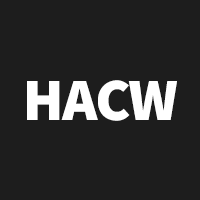
<style>
.page{position:relative;width:200px;height:200px;background:#1d1d1d}
.page>*{position:absolute;margin:0}
.t1{font:60px "SourceSansPro-Black";letter-spacing:-0.025em;color:#ffffff}
</style>
<div class="page">
<p class="t1" style="left:27px;top:80px;width:150px;height:41px">HACW</p>
</div>
